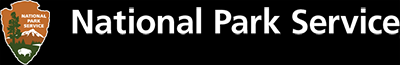
<style>
.page{position:relative;width:400px;height:65px;background:#000000}
.page>*{position:absolute;margin:0}
.t1{font:33.8px "Frutiger-Bold";color:#ffffff}
</style>
<div class="page">
<p class="t1" style="left:72px;top:7px;width:328px;height:28px">National Park Service</p>
</div>
